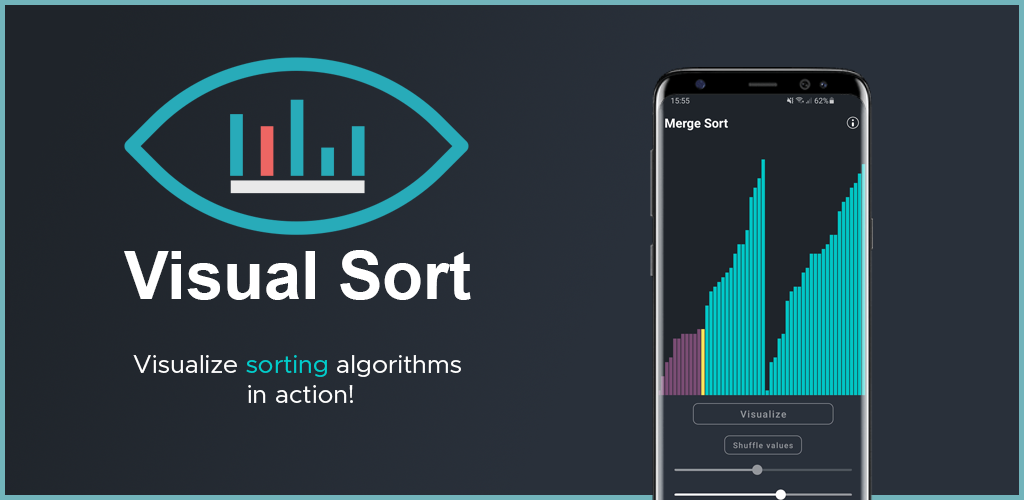
<style>
.page{position:relative;width:1024px;height:500px;background:#29303a}
.page>*{position:absolute;margin:0}
.t1{font:66.7px "Arial-BoldMT";color:#ffffff}
.t2{font:25px "Metropolis-Regular";color:#ffffff}
.t3{font:25px "Metropolis-Regular";color:#00cecd}
</style>
<div class="page">
<p class="t1" style="left:124px;top:250px;width:347px;height:50px">Visual Sort</p>
<p class="t2" style="left:133px;top:355px;width:328px;height:48px;text-align:center">Visualize <span class="t3">sorting </span>algorithms <br>in action!</p>
</div>
